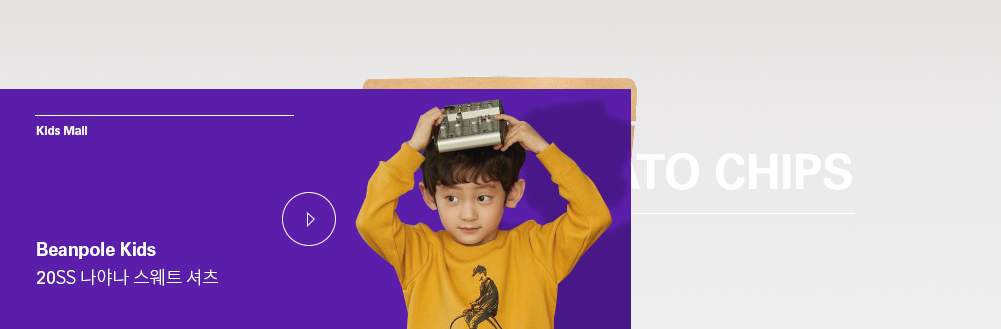
<style>
.page{position:relative;width:1001px;height:329px;background:#5b1eaa}
.page>*{position:absolute;margin:0}
.t1{font:12px "UniversLTStd-Bold";letter-spacing:-0.01em;color:#ffffff}
.t2{font:18px/28px "UniversLTStd-Bold";letter-spacing:-0.01em;color:#ffffff}
.t3{font:16px/28px "UniversLTStd-Bold";letter-spacing:-0.01em;color:#ffffff}
.t4{font:18px/28px "UniversLTStd";letter-spacing:-0.01em;color:#ffffff}
.t5{font:18px/28px "NotoSansCJKkr-Light";letter-spacing:-0.01em;color:#ffffff}
</style>
<div class="page">
<p class="t1" style="left:36px;top:126px;width:51px;height:9px">Kids Mall</p>
<p class="t2" style="left:37px;top:242px;width:181px;height:44px"><span class="t3"><br></span>Beanpole Kids <br><span class="t4">20</span><span class="t5">SS 나야나 스웨트 셔츠</span></p>
</div>
